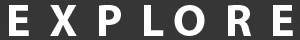
<style>
.page{position:relative;width:300px;height:40px;background:#363636}
.page>*{position:absolute;margin:0}
.t1{font:45.8px "MyriadPro-Bold";color:#ffffff}
</style>
<div class="page">
<p class="t1" style="left:9px;top:5px;width:284px;height:31px">E  X  P  L O  R  E</p>
</div>
